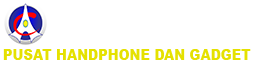
<style>
.page{position:relative;width:256px;height:62px;background:#ffffff}
.page>*{position:absolute;margin:0}
.t1{font:14.6px "Arial-Black";color:#e5e200;scale:0.9 1}
</style>
<div class="page">
<p class="t1" style="left:3px;top:49px;width:248px;height:11px">PUSAT HANDPHONE DAN GADGET</p>
</div>
